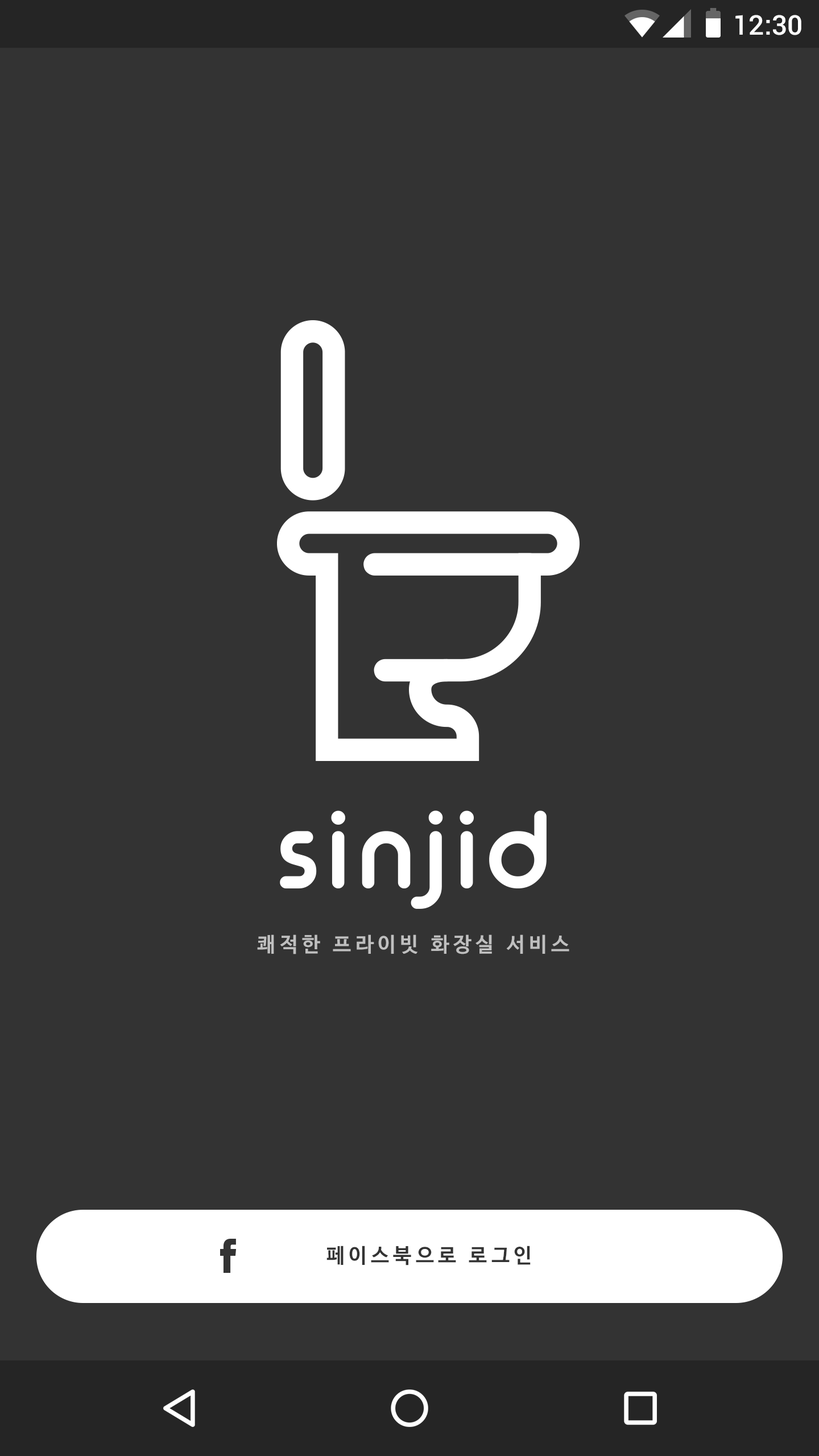
<style>
.page{position:relative;width:819px;height:1456px;background:#333333}
.page>*{position:absolute;margin:0}
.t1{font:27.3px "Roboto-Medium";color:#ffffff}
.t2{font:20.5px "NanumBarunGothicBold";letter-spacing:0.2em;color:#bfbfbf}
.t3{font:20.5px "NanumBarunGothicBold";letter-spacing:0.2em;color:#333333}
</style>
<div class="page">
<p class="t1" style="left:735px;top:15px;width:66px;height:20px">12:30</p>
<p class="t2" style="left:257px;top:934px;width:312px;height:20px">쾌적한 프라이빗 화장실 서비스</p>
<p class="t3" style="left:326px;top:1246px;width:205px;height:19px">페이스북으로 로그인</p>
</div>
